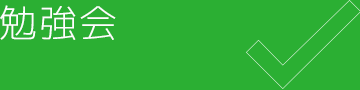
<style>
.page{position:relative;width:360px;height:90px;background:#2baf33}
.page>*{position:absolute;margin:0}
.t1{font:38px "mplus-1c-light";letter-spacing:0.05em;color:#fefefe}
</style>
<div class="page">
<p class="t1" style="left:0px;top:5px;width:116px;height:35px">勉強会</p>
</div>
